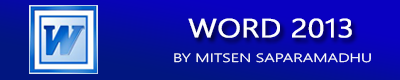
<style>
.page{position:relative;width:400px;height:80px}
.page>*{position:absolute;margin:0}
.t1{font:26px "NirmalaUI-Semilight";color:#fcfdff;font-weight:bold;scale:1.18 1}
.t2{font:12px "NirmalaUI-Semilight";color:#fcfdff;scale:1.38 1}
</style>
<div class="page">
<p class="t1" style="left:188px;top:18px;width:164px;height:20px">WORD 2013</p>
<p class="t2" style="left:174px;top:53px;width:197px;height:10px">BY MITSEN SAPARAMADHU</p>
</div>
